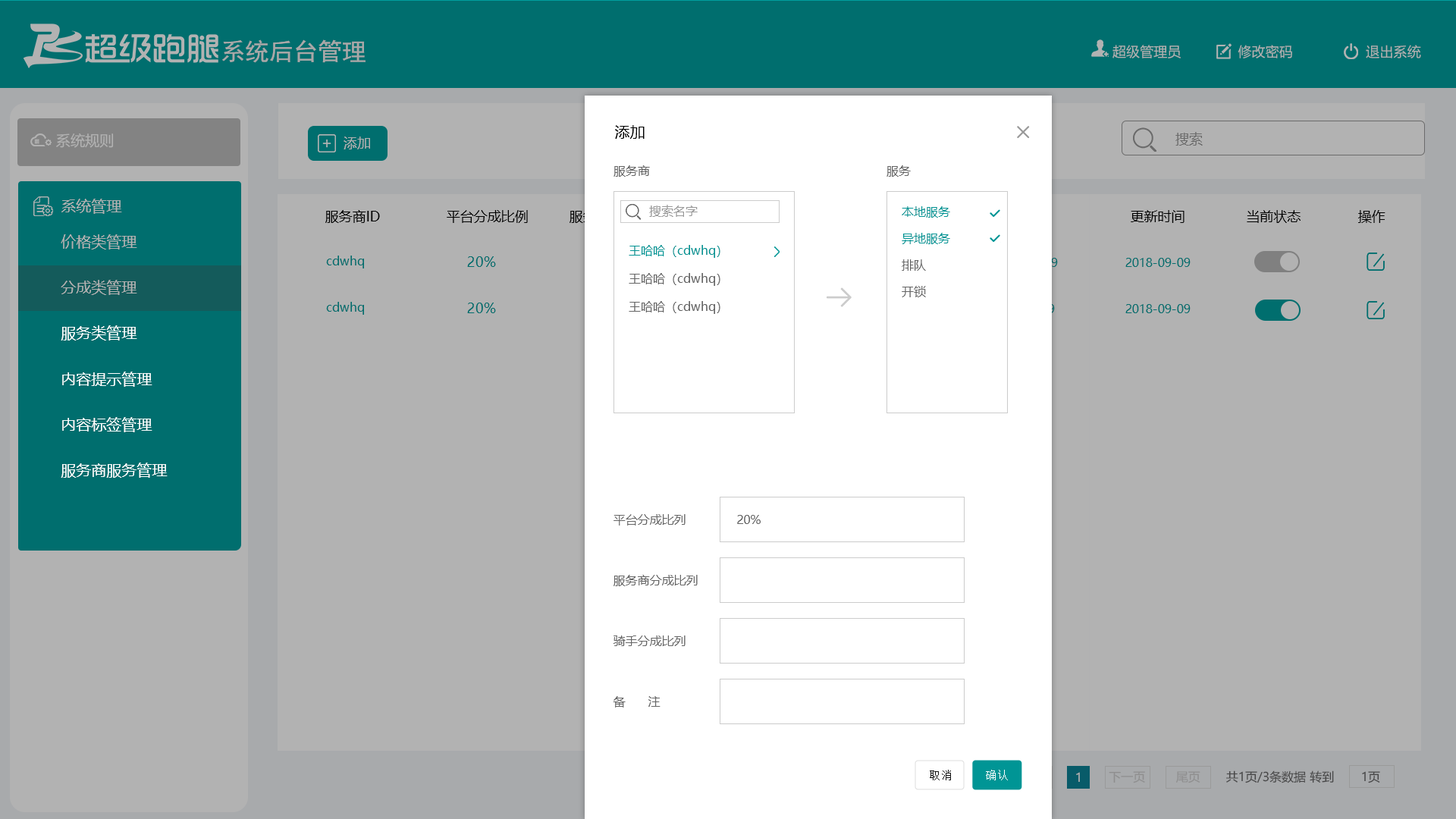
<style>
.page{position:relative;width:1456px;height:819px;background:#b2b2b2}
.page>*{position:absolute;margin:0}
.t1{font:24.4px "SimHei";color:#a8a8a8}
.t2{font:13.7px "MicrosoftYaHei";color:#b2b2b2}
.t3{font:15.2px "MicrosoftYaHei";color:#000000}
.t4{font:14.5px "MicrosoftYaHei";color:#b2b2b2}
.t5{font:13.6px "MicrosoftYaHei";color:#b2b2b2}
.t6{font:13.6px "MicrosoftYaHei";color:#6b6b6b}
.t7{font:12.1px "MicrosoftYaHei";color:#666666}
.t8{font:15.2px "MicrosoftYaHei";color:#b2b2b2}
.t9{font:12.1px "MicrosoftYaHei";color:#999999}
.t10{font:12.1px "MicrosoftYaHei";color:#009595}
.t11{font:13.6px "MicrosoftYaHei";color:#000000}
.t12{font:12.1px "MicrosoftYaHei";color:#006e6e}
.t13{font:13.6px "MicrosoftYaHei";color:#006e6e}
.t14{font:15.2px "MicrosoftYaHei";color:#ffffff}
.t15{font:11.5px "SimSun";letter-spacing:0.075em;color:#111111}
.t16{font:11.5px "SimSun";letter-spacing:0.075em;color:#ffffff}
.t17{font:12.1px "MicrosoftYaHei";color:#b2b2b2}
.t18{font:12.1px "MicrosoftYaHei";color:#8e8e8e}
.t19{font:12.1px "MicrosoftYaHei";color:#464646}
</style>
<div class="page">
<p class="t1" style="left:222px;top:39px;width:144px;height:24px">系统后台管理</p>
<p class="t2" style="left:1112px;top:45px;width:309px;height:13px">超级管理员              修改密码                  退出系统</p>
<p class="t3" style="left:615px;top:125px;width:30px;height:14px">添加</p>
<p class="t4" style="left:56px;top:133px;width:58px;height:15px">系统规则</p>
<p class="t5" style="left:344px;top:136px;width:26px;height:13px">添加</p>
<p class="t6" style="left:1175px;top:132px;width:28px;height:14px">搜索</p>
<p class="t7" style="left:613px;top:165px;width:37px;height:12px">服务商</p>
<p class="t7" style="left:886px;top:165px;width:25px;height:12px">服务</p>
<p class="t8" style="left:61px;top:199px;width:61px;height:15px">系统管理</p>
<p class="t9" style="left:649px;top:205px;width:49px;height:12px">搜索名字</p>
<p class="t10" style="left:902px;top:206px;width:48px;height:12px">本地服务</p>
<p class="t11" style="left:325px;top:210px;width:55px;height:13px">服务商ID</p>
<p class="t11" style="left:447px;top:210px;width:81px;height:13px">平台分成比例</p>
<p class="t11" style="left:1131px;top:210px;width:54px;height:13px">更新时间</p>
<p class="t11" style="left:1247px;top:210px;width:54px;height:13px">当前状态</p>
<p class="t11" style="left:1358px;top:210px;width:27px;height:13px">操作</p>
<p class="t10" style="left:902px;top:233px;width:48px;height:11px">异地服务</p>
<p class="t8" style="left:61px;top:234px;width:76px;height:15px">价格类管理</p>
<p class="t10" style="left:629px;top:245px;width:91px;height:13px">王哈哈（cdwhq）</p>
<p class="t12" style="left:326px;top:256px;width:38px;height:12px">cdwhq</p>
<p class="t13" style="left:467px;top:256px;width:29px;height:11px">20%</p>
<p class="t12" style="left:1125px;top:258px;width:66px;height:9px">2018-09-09</p>
<p class="t7" style="left:902px;top:259px;width:24px;height:12px">排队</p>
<p class="t8" style="left:61px;top:280px;width:76px;height:15px">分成类管理</p>
<p class="t7" style="left:629px;top:273px;width:91px;height:13px">王哈哈（cdwhq）</p>
<p class="t7" style="left:902px;top:286px;width:24px;height:11px">开锁</p>
<p class="t12" style="left:326px;top:302px;width:38px;height:13px">cdwhq</p>
<p class="t13" style="left:467px;top:303px;width:29px;height:10px">20%</p>
<p class="t7" style="left:629px;top:301px;width:91px;height:13px">王哈哈（cdwhq）</p>
<p class="t12" style="left:1125px;top:304px;width:66px;height:9px">2018-09-09</p>
<p class="t14" style="left:61px;top:325px;width:76px;height:15px">服务类管理</p>
<p class="t14" style="left:62px;top:372px;width:90px;height:15px">内容提示管理</p>
<p class="t14" style="left:62px;top:417px;width:90px;height:15px">内容标签管理</p>
<p class="t14" style="left:61px;top:463px;width:107px;height:15px">服务商服务管理</p>
<p class="t7" style="left:613px;top:514px;width:73px;height:12px">平台分成比列</p>
<p class="t7" style="left:737px;top:515px;width:24px;height:9px">20%</p>
<p class="t7" style="left:613px;top:575px;width:85px;height:11px">服务商分成比列</p>
<p class="t7" style="left:613px;top:635px;width:73px;height:11px">骑手分成比列</p>
<p class="t7" style="left:613px;top:696px;width:47px;height:12px">备      注</p>
<p class="t15" style="left:930px;top:770px;width:21px;height:10px">取消</p>
<p class="t16" style="left:986px;top:770px;width:22px;height:10px">确认</p>
<p class="t17" style="left:1076px;top:772px;width:4px;height:10px">1</p>
<p class="t18" style="left:1109px;top:771px;width:36px;height:12px">下一页</p>
<p class="t18" style="left:1176px;top:771px;width:24px;height:12px">尾页</p>
<p class="t19" style="left:1226px;top:770px;width:108px;height:13px">共1页/3条数据 转到</p>
<p class="t19" style="left:1362px;top:771px;width:18px;height:12px">1页</p>
</div>
